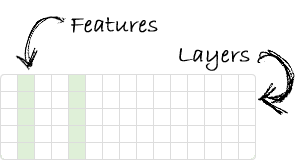
<style>
.page{position:relative;width:300px;height:160px;background:#ffffff}
.page>*{position:absolute;margin:0}
.t1{font:24px "BradleyHandITC";color:#000000;font-weight:bold}
</style>
<div class="page">
<p class="t1" style="left:71px;top:17px;width:87px;height:16px">Features</p>
<p class="t1" style="left:179px;top:48px;width:71px;height:23px">Layers</p>
</div>
